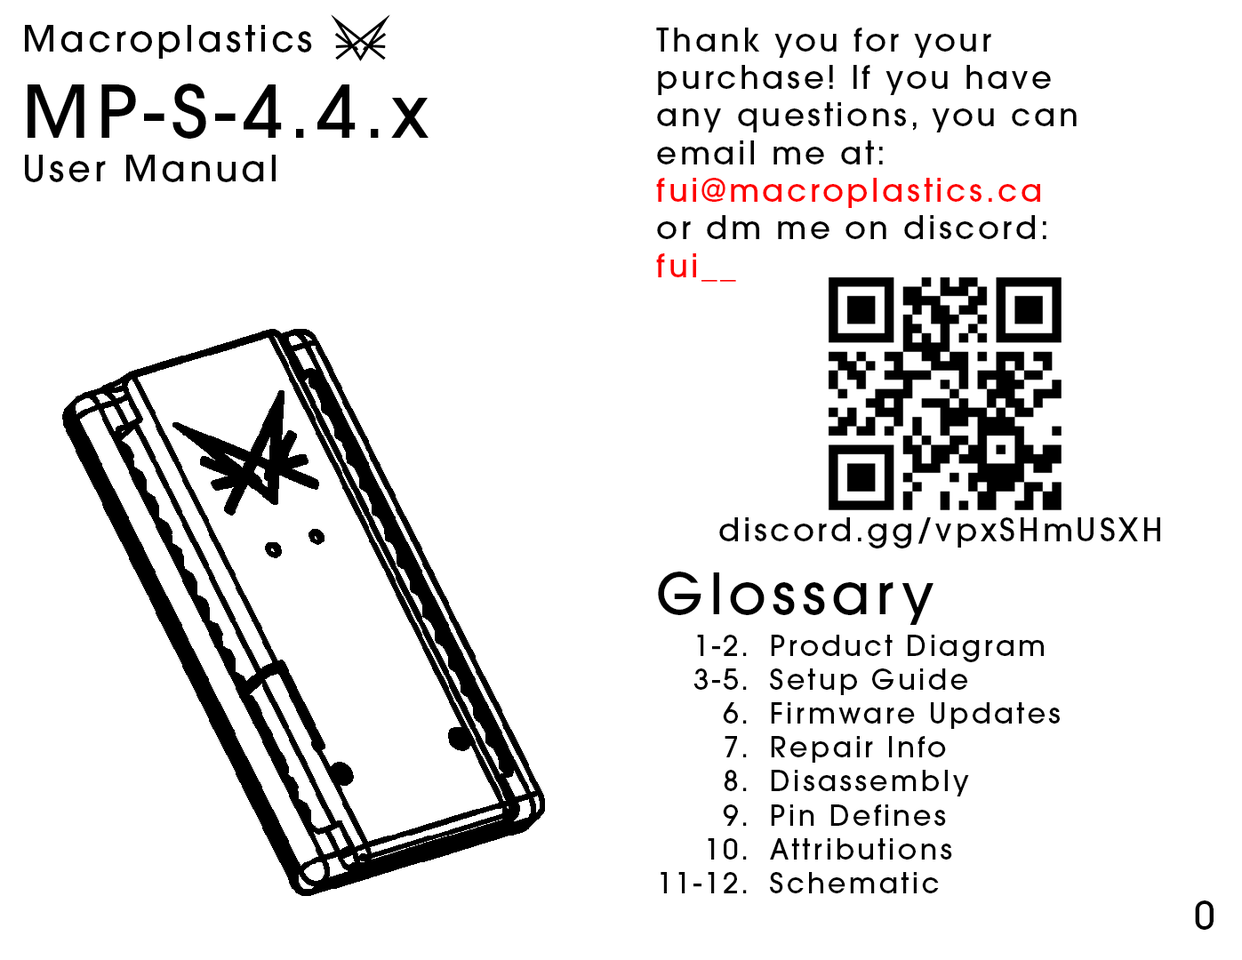
<style>
.page{position:relative;width:1242px;height:960px;background:#ffffff}
.page>*{position:absolute;margin:0}
.t1{font:36.1px "AvantGarde-Medium";letter-spacing:0.1em;color:#000000}
.t2{font:72.2px "AvantGarde-Medium";letter-spacing:0.1em;color:#000000}
.t3{font:31.4px "AvantGarde-Medium";letter-spacing:0.1em;color:#000000}
.t4{font:31.4px "AvantGarde-Medium";letter-spacing:0.1em;color:#ff0000}
.t5{font:56.5px "AvantGarde-Medium";letter-spacing:0.1em;color:#000000}
.t6{font:28.2px "AvantGarde-Medium";letter-spacing:0.1em;color:#000000}
.t7{font:37.6px "AvantGarde-Medium";letter-spacing:0.1em;color:#000000}
</style>
<div class="page">
<p class="t1" style="left:25px;top:25px;width:404px;height:157px">Macroplastics<br><span class="t2">MP-S-4.4.x<br></span>User Manual</p>
<p class="t3" style="left:656px;top:28px;width:421px;height:254px">Thank you for your<br>purchase! If you have<br>any questions, you can<br>email me at:<br><span class="t4">fui@macroplastics.ca<br></span>or dm me on discord:<br><span class="t4">fui__</span></p>
<p class="t3" style="left:719px;top:517px;width:441px;height:32px">discord.gg/vpxSHmUSXH</p>
<p class="t5" style="left:658px;top:572px;width:275px;height:53px">Glossary</p>
<p class="t6" style="left:661px;top:635px;width:86px;height:258px;text-align:right">1-2.<br>3-5.<br>6.<br>7.<br>8.<br>9.<br>10.<br>11-12.</p>
<p class="t6" style="left:770px;top:635px;width:290px;height:258px">Product Diagram<br>Setup Guide<br>Firmware Updates<br>Repair Info<br>Disassembly<br>Pin Defines<br>Attributions<br>Schematic</p>
<p class="t7" style="left:1195px;top:901px;width:18px;height:29px">0</p>
</div>
